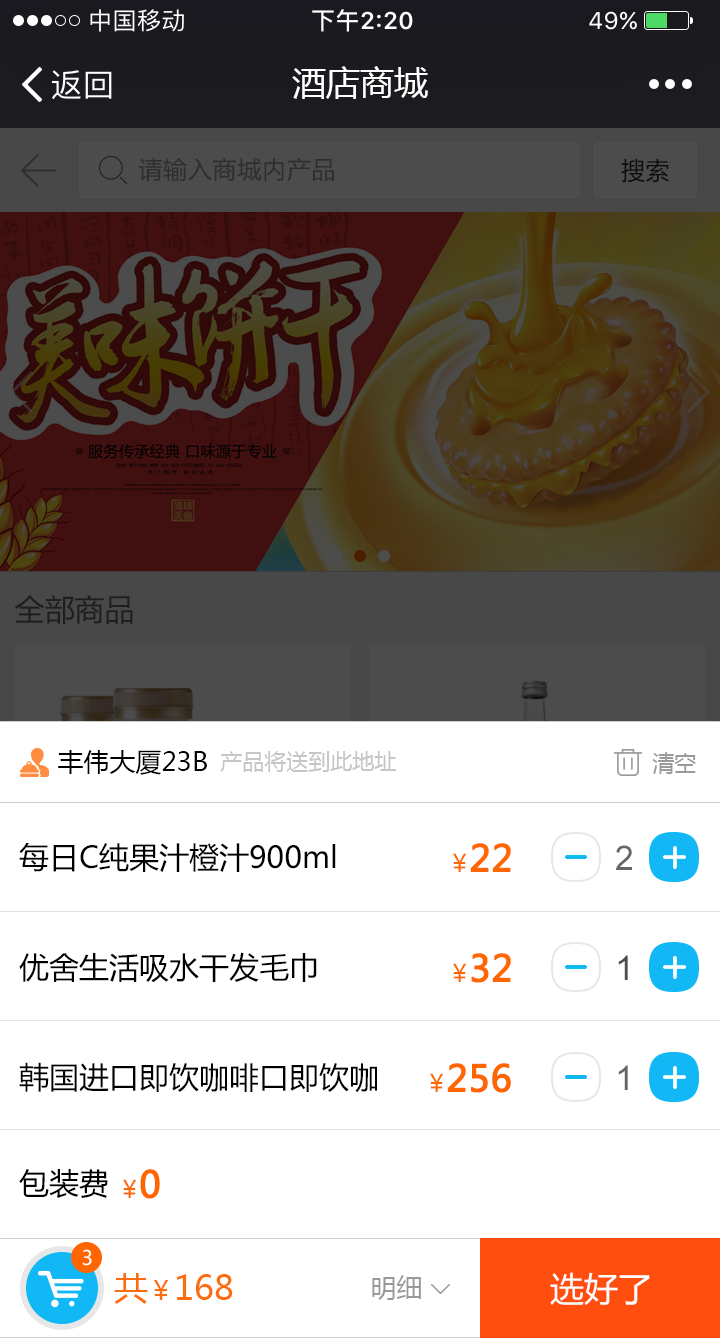
<style>
.page{position:relative;width:720px;height:1338px;background:#ffffff}
.page>*{position:absolute;margin:0}
.t1{font:34px "MicrosoftYaHei";color:#ffffff}
.t2{font:26px "MicrosoftYaHei";color:#000000}
.t3{font:22px "MicrosoftYaHei";color:#c6c6c6}
.t4{font:22px "MicrosoftYaHei";color:#999999}
.t5{font:30px "MicrosoftYaHei";color:#000000}
.t6{font:36px "MicrosoftYaHei";color:#ff6600;font-weight:bold}
.t7{font:34px "ArialMT";color:#666666}
.t8{font:24px "MicrosoftYaHei";color:#ff6600}
.t9{font:34px "ArialMT";color:#4d4d4d}
.t10{font:20px "MicrosoftYaHei";color:#ffffff}
.t11{font:34px "MicrosoftYaHei";color:#fe6d0c}
.t12{font:26px "MicrosoftYaHei";color:#fe6d0c}
.t13{font:26px "MicrosoftYaHei";color:#999999}
</style>
<div class="page">
<p class="t1" style="left:292px;top:66px;width:136px;height:33px">酒店商城</p>
<p class="t2" style="left:58px;top:750px;width:149px;height:25px">丰伟大厦23B</p>
<p class="t3" style="left:220px;top:751px;width:177px;height:21px">产品将送到此地址</p>
<p class="t4" style="left:652px;top:752px;width:44px;height:22px">清空</p>
<p class="t5" style="left:19px;top:843px;width:317px;height:29px">每日C纯果汁橙汁900ml</p>
<p class="t6" style="left:470px;top:843px;width:41px;height:29px">22</p>
<p class="t7" style="left:616px;top:845px;width:16px;height:25px">2</p>
<p class="t8" style="left:453px;top:853px;width:14px;height:19px">￥</p>
<p class="t5" style="left:19px;top:952px;width:298px;height:31px">优舍生活吸水干发毛巾</p>
<p class="t6" style="left:471px;top:953px;width:40px;height:30px">32</p>
<p class="t8" style="left:453px;top:963px;width:14px;height:19px">￥</p>
<p class="t9" style="left:618px;top:955px;width:10px;height:25px">1</p>
<p class="t5" style="left:19px;top:1062px;width:358px;height:31px">韩国进口即饮咖啡口即饮咖</p>
<p class="t8" style="left:430px;top:1073px;width:14px;height:19px">￥</p>
<p class="t6" style="left:447px;top:1063px;width:64px;height:30px">256</p>
<p class="t7" style="left:618px;top:1065px;width:10px;height:25px">1</p>
<p class="t5" style="left:19px;top:1169px;width:89px;height:29px">包装费</p>
<p class="t6" style="left:140px;top:1169px;width:20px;height:30px">0</p>
<p class="t8" style="left:123px;top:1179px;width:14px;height:19px">￥</p>
<p class="t10" style="left:82px;top:1249px;width:10px;height:17px">3</p>
<p class="t11" style="left:114px;top:1273px;width:119px;height:31px">共<span class="t12">￥</span>168</p>
<p class="t13" style="left:372px;top:1275px;width:49px;height:25px">明细</p>
<p class="t1" style="left:550px;top:1272px;width:100px;height:33px">选好了</p>
</div>
